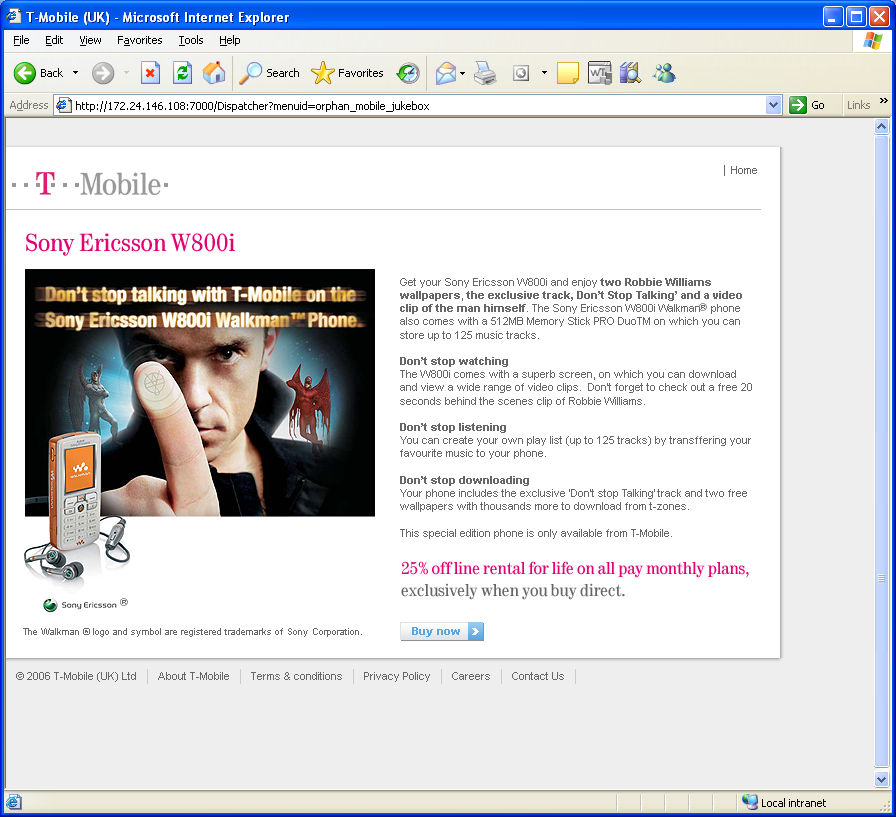
<style>
.page{position:relative;width:896px;height:817px;background:#ffffff}
.page>*{position:absolute;margin:0}
.t1{font:26px "Tele-Antiqua";color:#e20074}
.t2{font:11px "ArialMT";color:#666666}
.t3{font:11px "Arial-BoldMT";color:#666666}
.t4{font:18px "Tele-Antiqua";color:#e20074}
.t5{font:18px "Tele-Antiqua";color:#666666}
.t6{font:9px "ArialMT";color:#666666}
.t7{font:11px "Arial-BoldMT";color:#5ca5dc}
</style>
<div class="page">
<p class="t1" style="left:26px;top:233px;width:209px;height:23px">Sony Ericsson W800i</p>
<p class="t2" style="left:400px;top:278px;width:352px;height:261px">Get your Sony Ericsson W800i and enjoy <span class="t3">two Robbie Williams <br>wallpapers</span>,<span class="t3"> the exclusive track, Don’t Stop Talking’ and a video clip of the man himself</span>. The Sony Ericsson W800i WalkmanR  phone also comes with a 512MB Memory Stick PRO DuoTM on which you can store up to 125 music tracks.<br><span class="t3"><br>Don’t stop watching<br></span>The W800i comes with a superb screen, on which you can download and view a wide range of video clips.  Don’t forget to check out a free 20 seconds behind the scenes clip of Robbie Williams.<br><br><span class="t3">Don’t stop listening<br></span>You can create your own play list (up to 125 tracks) by transffering your favourite music to your phone.<br><br><span class="t3">Don’t stop downloading<br></span>Your phone includes the exclusive ‘Don’t stop Talking’ track and two free wallpapers with thousands more to download from t-zones.<br><br>This special edition phone is only available from T-Mobile.</p>
<p class="t4" style="left:401px;top:561px;width:348px;height:39px">25% off line rental for life on all pay monthly plans, <span class="t5">exclusively when you buy direct.</span></p>
<p class="t2" style="left:122px;top:600px;width:4px;height:4px">R</p>
<p class="t6" style="left:23px;top:628px;width:339px;height:9px">The Walkman ® logo and symbol are registered trademarks of Sony Corporation.</p>
<p class="t7" style="left:437px;top:629px;width:23px;height:6px">now</p>
</div>
